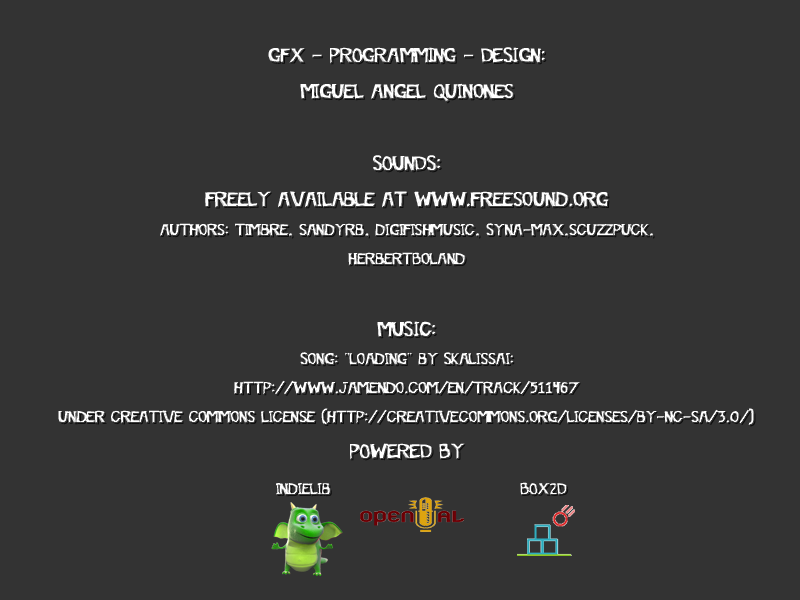
<style>
.page{position:relative;width:800px;height:600px;background:#333333}
.page>*{position:absolute;margin:0}
.t1{font:24px "OffTheDrugs"}
.t2{font:30px "OffTheDrugs"}
.t3{font:23.7px "OffTheDrugs"}
</style>
<div class="page">
<p class="t1" style="left:58px;top:47px;width:697px;height:449px;text-align:center"><span class="t2">GFX - PROGRAMMING - DESIGN:<br>Miguel Angel Quinones<br><br>SOUNDS: <br>freely available at www.freesound.org<br></span>Authors: Timbre, sandyrb, digifishmusic, Syna-Max,scuzzpuck,<br>HerbertBoland<br><span class="t2"><br>MUSIC:<br></span>Song: "Loading" by Skalissai:<br>http://www.jamendo.com/en/track/511467 <br>under creative commons license (http://creativecommons.org/licenses/by-nc-sa/3.0/)<br><span class="t2">POWERED BY<br>                                  </span><span class="t3">indielib          </span>BOX2D</p>
</div>
